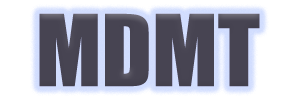
<style>
.page{position:relative;width:300px;height:101px;background:#ffffff}
.page>*{position:absolute;margin:0}
.t1{font:91.7px "Impact";color:#474452}
</style>
<div class="page">
<p class="t1" style="left:39px;top:13px;width:221px;height:74px">MDMT</p>
</div>
